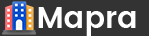
<style>
.page{position:relative;width:149px;height:36px;background:#333333}
.page>*{position:absolute;margin:0}
.t1{font:30px "Poppins-SemiBold";color:#ffffff}
</style>
<div class="page">
<p class="t1" style="left:38px;top:7px;width:98px;height:29px">Mapra</p>
</div>
